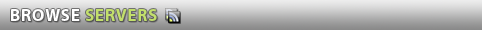
<style>
.page{position:relative;width:482px;height:30px}
.page>*{position:absolute;margin:0}
.t1{font:17px "Myriad-Bold";letter-spacing:0.05em;color:#c2df6c;text-transform:uppercase}
.t2{font:17px "Myriad-Bold";letter-spacing:0.05em;color:#ffffff;text-transform:uppercase}
</style>
<div class="page">
<p class="t1" style="left:11px;top:9px;width:146px;height:12px"><span class="t2">Browse </span>Servers</p>
</div>
